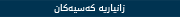
<style>
.page{position:relative;width:180px;height:17px;background:#003351}
.page>*{position:absolute;margin:0}
.t1{font:9px "DroidArabicKufi";color:#ffffff}
</style>
<div class="page">
<p class="t1" style="left:54px;top:4px;width:71px;height:9px">زانیاریە کەسیەکان</p>
</div>
